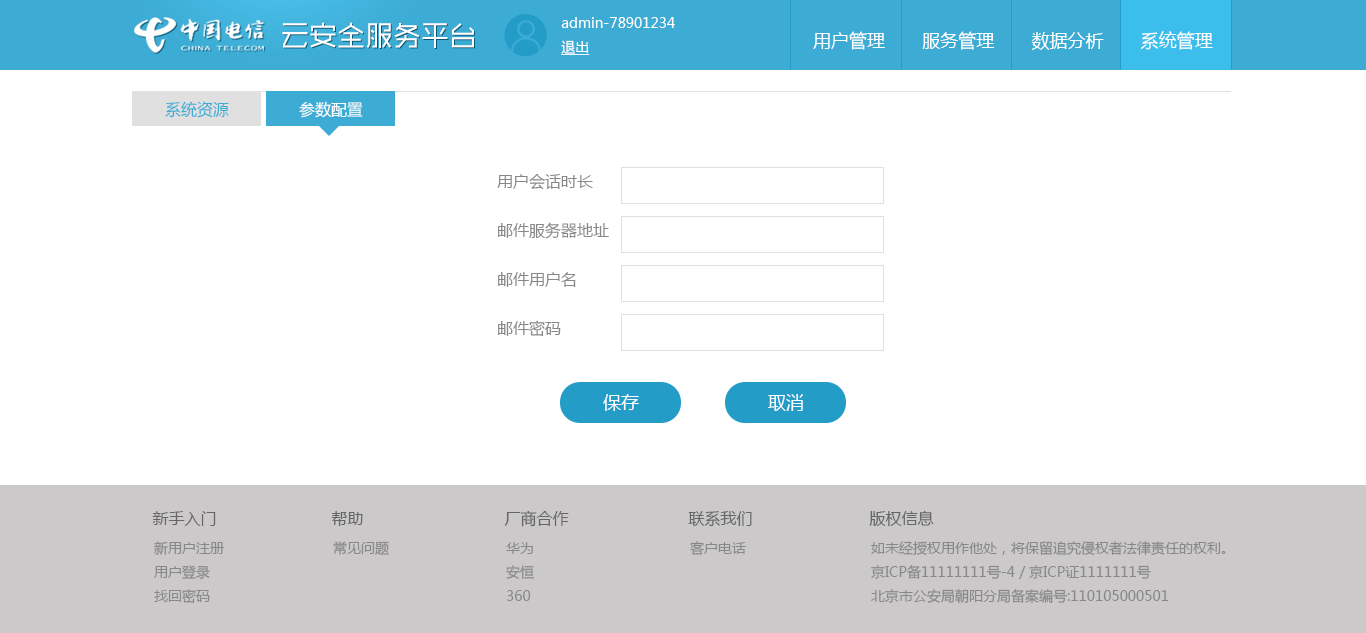
<style>
.page{position:relative;width:1366px;height:633px;background:#ffffff}
.page>*{position:absolute;margin:0}
.t1{font:14px/24px "MicrosoftYaHei";color:#ffffff}
.t2{font:14px/24px "MicrosoftYaHei";color:#ffffff;text-decoration:underline}
.t3{font:28px "MFShangHei_Noncommercial-Regular";color:#ffffff}
.t4{font:18px "MicrosoftYaHei";color:#ffffff}
.t5{font:16px "MicrosoftYaHei";color:#3cacd4}
.t6{font:16px "MicrosoftYaHei";color:#ffffff}
.t7{font:16px/49px "MicrosoftYaHei";color:#888888}
.t8{font:16px "MicrosoftYaHei";color:#666666}
.t9{font:14px/24px "MicrosoftYaHei";color:#888888}
.t10{font:14px "MicrosoftYaHei";color:#888888}
</style>
<div class="page">
<p class="t1" style="left:561px;top:17px;width:114px;height:38px">admin-78901234<br><span class="t2">退出</span></p>
<p class="t3" style="left:282px;top:22px;width:192px;height:26px">云安全服务平台</p>
<p class="t4" style="left:813px;top:31px;width:400px;height:19px">用户管理       服务管理       数据分析       系统管理</p>
<p class="t5" style="left:165px;top:101px;width:64px;height:17px">系统资源</p>
<p class="t6" style="left:299px;top:101px;width:64px;height:17px">参数配置</p>
<p class="t7" style="left:497px;top:173px;width:112px;height:164px">用户会话时长<br>邮件服务器地址<br>邮件用户名<br>邮件密码</p>
<p class="t4" style="left:603px;top:394px;width:36px;height:17px">保存</p>
<p class="t4" style="left:768px;top:394px;width:35px;height:17px">取消</p>
<p class="t8" style="left:504px;top:510px;width:65px;height:17px">厂商合作</p>
<p class="t8" style="left:869px;top:510px;width:65px;height:16px">版权信息</p>
<p class="t8" style="left:152px;top:511px;width:64px;height:15px">新手入门</p>
<p class="t8" style="left:331px;top:511px;width:32px;height:15px">帮助</p>
<p class="t8" style="left:688px;top:511px;width:64px;height:16px">联系我们</p>
<p class="t9" style="left:154px;top:541px;width:70px;height:62px">新用户注册<br>用户登录<br>找回密码</p>
<p class="t10" style="left:333px;top:541px;width:56px;height:14px">常见问题</p>
<p class="t9" style="left:506px;top:542px;width:28px;height:59px">华为<br>安恒<br>360</p>
<p class="t10" style="left:690px;top:541px;width:56px;height:14px">客户电话</p>
<p class="t9" style="left:871px;top:541px;width:355px;height:63px">如未经授权用作他处，将保留追究侵权者法律责任的权利。<br>京ICP备11111111号-4 / 京ICP证1111111号<br>北京市公安局朝阳分局备案编号:110105000501</p>
</div>
